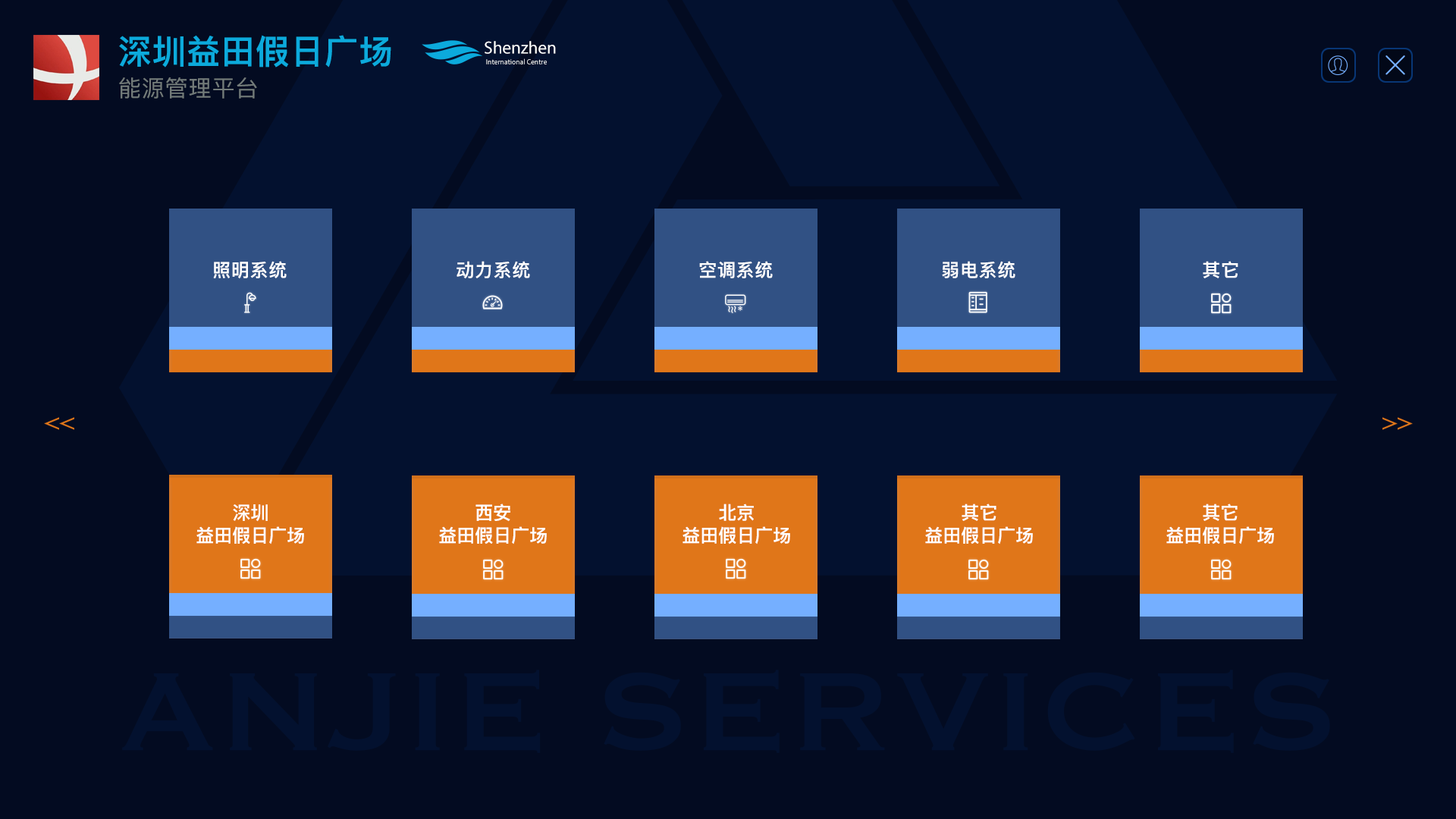
<style>
.page{position:relative;width:1456px;height:819px;background:#030b21}
.page>*{position:absolute;margin:0}
.t1{font:33.6px "PingFangSC-Semibold";letter-spacing:0.025em;color:#0caadc}
.t2{font:17.5px "MyriadPro-Regular";color:#ffffff}
.t3{font:7.3px "MyriadPro-Regular";color:#ffffff}
.t4{font:22.9px "PingFangSC-Regular";letter-spacing:0.025em;color:#727a79}
.t5{font:18.2px "PingFangSC-Semibold";letter-spacing:0.025em;color:#ffffff}
.t6{font:18.2px/22.7px "PingFangSC-Semibold";color:#ffffff}
</style>
<div class="page">
<p class="t1" style="left:119px;top:35px;width:272px;height:32px">深圳益田假日广场</p>
<p class="t2" style="left:485px;top:41px;width:71px;height:13px">Shenzhen</p>
<p class="t3" style="left:486px;top:58px;width:61px;height:6px">International Centre</p>
<p class="t4" style="left:119px;top:77px;width:138px;height:22px">能源管理平台</p>
<p class="t5" style="left:213px;top:261px;width:74px;height:18px">照明系统</p>
<p class="t5" style="left:457px;top:261px;width:73px;height:18px">动力系统</p>
<p class="t5" style="left:699px;top:261px;width:74px;height:17px">空调系统</p>
<p class="t5" style="left:942px;top:261px;width:73px;height:17px">弱电系统</p>
<p class="t5" style="left:1203px;top:261px;width:35px;height:17px">其它</p>
<p class="t6" style="left:196px;top:504px;width:108px;height:40px;text-align:center">深圳<br>益田假日广场</p>
<p class="t6" style="left:439px;top:504px;width:108px;height:40px;text-align:center">西安<br>益田假日广场</p>
<p class="t6" style="left:682px;top:504px;width:108px;height:40px;text-align:center">北京<br>益田假日广场</p>
<p class="t6" style="left:925px;top:504px;width:108px;height:40px;text-align:center">其它<br>益田假日广场</p>
<p class="t6" style="left:1166px;top:504px;width:108px;height:40px;text-align:center">其它<br>益田假日广场</p>
</div>
